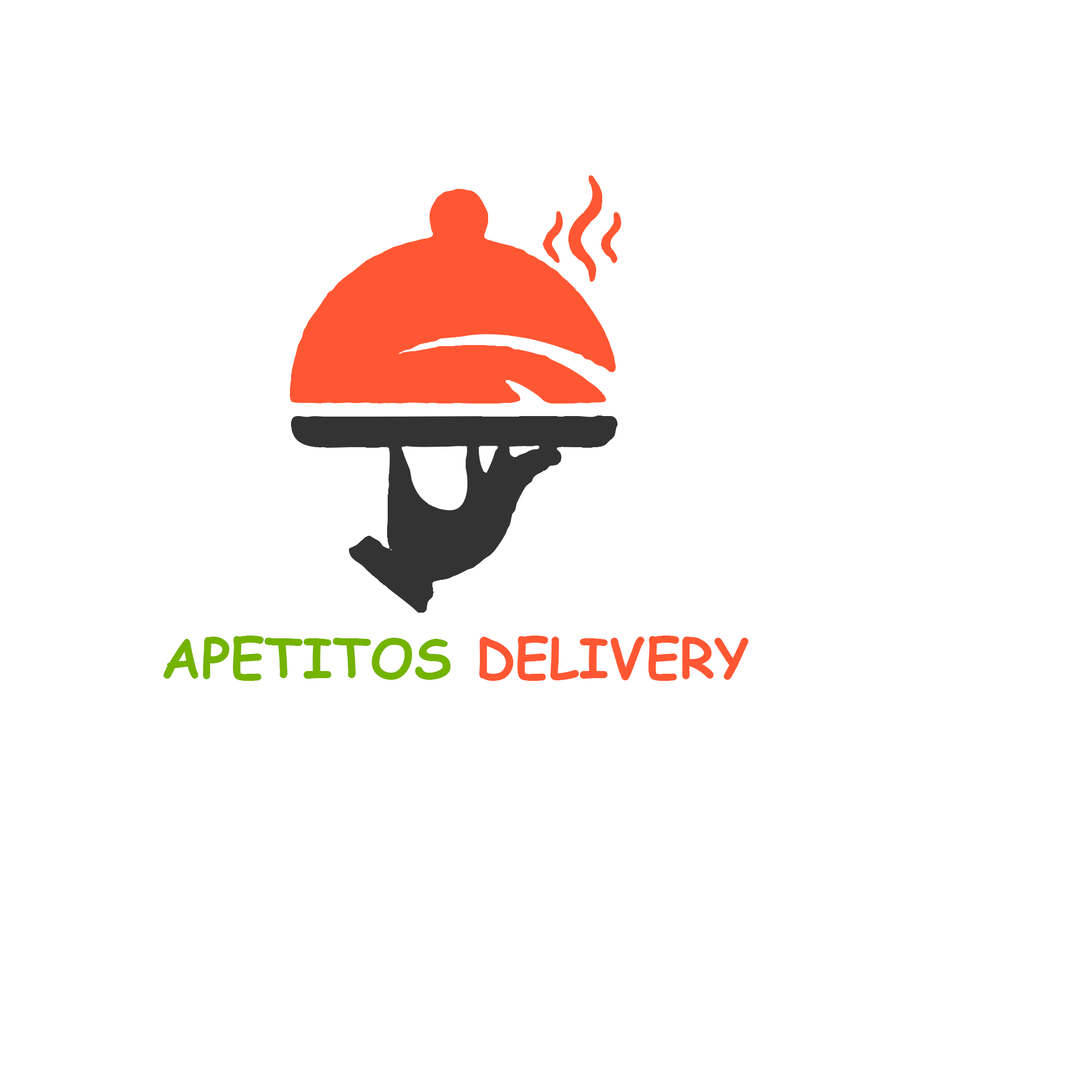
<style>
.page{position:relative;width:1092px;height:1092px;background:#ffffff}
.page>*{position:absolute;margin:0}
.t1{font:54.6px "ComicSansMS-Bold";color:#74b300}
.t2{font:54.6px "ComicSansMS-Bold";color:#ff5733}
</style>
<div class="page">
<p class="t1" style="left:163px;top:636px;width:586px;height:45px">APETITOS <span class="t2">DELIVERY</span></p>
</div>
